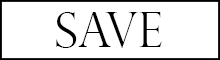
<style>
.page{position:relative;width:220px;height:60px;background:#ffffff}
.page>*{position:absolute;margin:0}
.t1{font:48px "PerpetuaTitlingMT-Light";color:#000000}
</style>
<div class="page">
<p class="t1" style="left:56px;top:12px;width:106px;height:36px">SAVE</p>
</div>
